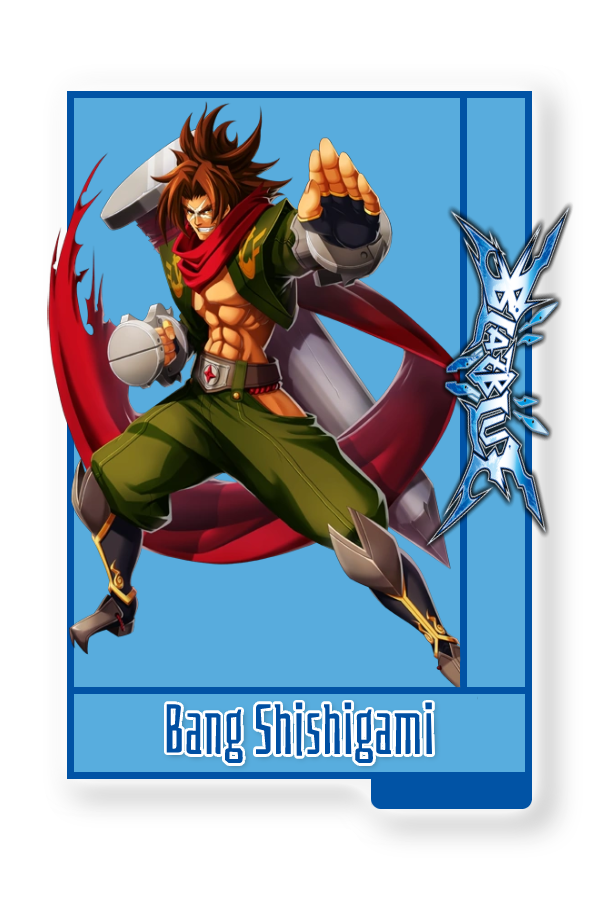
<style>
.page{position:relative;width:600px;height:900px;background:#ffffff}
.page>*{position:absolute;margin:0}
.t1{font:70px "Bahianita-Regular";color:#004fa2}
</style>
<div class="page">
<p class="t1" style="left:166px;top:702px;width:267px;height:62px">Bang Shishigami</p>
</div>
